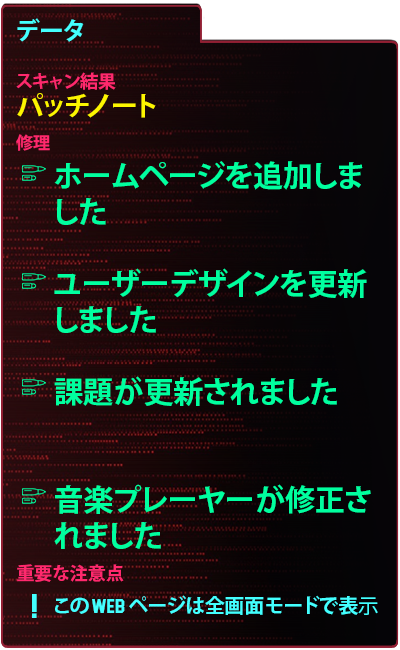
<style>
.page{position:relative;width:400px;height:650px}
.page>*{position:absolute;margin:0}
.t1{font:25px "KozGoPr6N-Bold";color:#43ffff}
.t2{font:18px "KozGoPr6N-Bold";color:#ff296d}
.t3{font:27px "KozGoPr6N-Bold";color:#fdf500}
.t4{font:17px "KozGoPr6N-Bold";color:#ff296d}
.t5{font:30px "KozGoPr6N-Bold";color:#00ff9f}
.t6{font:35px "Blockletter";color:#43ffff}
.t7{font:20px "KozGoPr6N-Regular";color:#43ffff}
.t8{font:20px "KozGoPr6N-Bold";color:#43ffff}
.t9{font:20px "Blockletter";color:#43ffff}
</style>
<div class="page">
<p class="t1" style="left:17px;top:18px;width:67px;height:24px">データ</p>
<p class="t2" style="left:16px;top:72px;width:100px;height:18px">スキャン結果</p>
<p class="t3" style="left:17px;top:93px;width:139px;height:25px">パッチノート</p>
<p class="t4" style="left:16px;top:134px;width:34px;height:17px">修理</p>
<p class="t5" style="left:54px;top:161px;width:317px;height:388px">ホームページを追加しました<br><br>ユーザーデザインを更新しました<br><br>課題が更新されました<br><br><br>音楽プレーヤーが修正されました</p>
<p class="t2" style="left:17px;top:564px;width:107px;height:18px">重要な注意点</p>
<p class="t6" style="left:32px;top:594px;width:5px;height:24px">!</p>
<p class="t7" style="left:55px;top:595px;width:323px;height:20px"><span class="t8">この</span><span class="t9"> Web </span><span class="t8">ページは全画面モードで表</span>示されるように設計されています</p>
</div>
